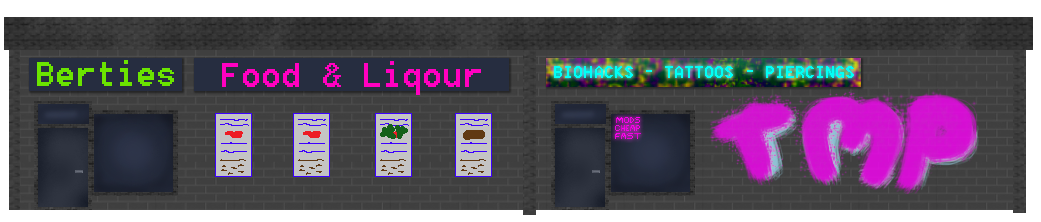
<style>
.page{position:relative;width:1041px;height:222px}
.page>*{position:absolute;margin:0}
.t1{font:36px "8514oem";letter-spacing:0.005em;color:#6be400}
.t2{font:36px "8514oem";letter-spacing:0.005em;color:#ff00c0}
.t3{font:14px "8514oem";letter-spacing:0.005em;color:#02fff6}
</style>
<div class="page">
<p class="t1" style="left:37px;top:60px;width:137px;height:26px">Berties</p>
<p class="t2" style="left:222px;top:61px;width:259px;height:34px">Food &amp; Liqour</p>
<p class="t3" style="left:554px;top:66px;width:300px;height:12px">BIOHACKS - TATTOOS - PIERCINGS</p>
</div>
